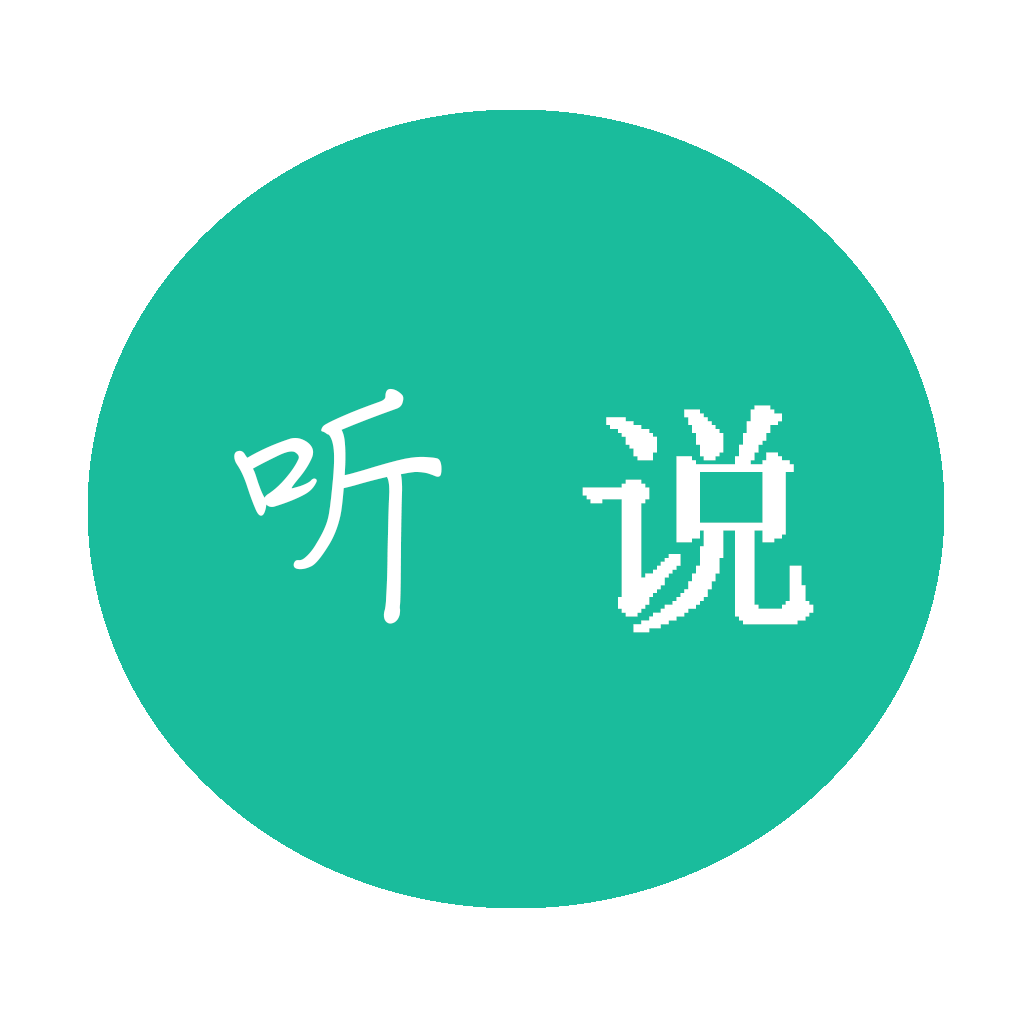
<style>
.page{position:relative;width:1024px;height:1024px;background:#ffffff}
.page>*{position:absolute;margin:0}
.t1{font:250px "PensinkaiEG-Bold-Big5";letter-spacing:-0.04em;color:#ffffff}
.t2{font:250px "System";letter-spacing:-0.04em;color:#ffffff}
</style>
<div class="page">
<p class="t1" style="left:234px;top:388px;width:580px;height:245px">听  <span class="t2">说</span></p>
</div>
